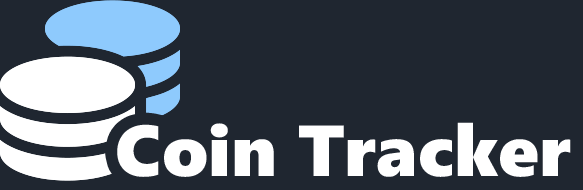
<style>
.page{position:relative;width:583px;height:190px;background:#1f2630}
.page>*{position:absolute;margin:0}
.t1{font:72px "SegoeUIBlack";color:#ffffff}
</style>
<div class="page">
<p class="t1" style="left:117px;top:122px;width:454px;height:55px">Coin Tracker</p>
</div>
